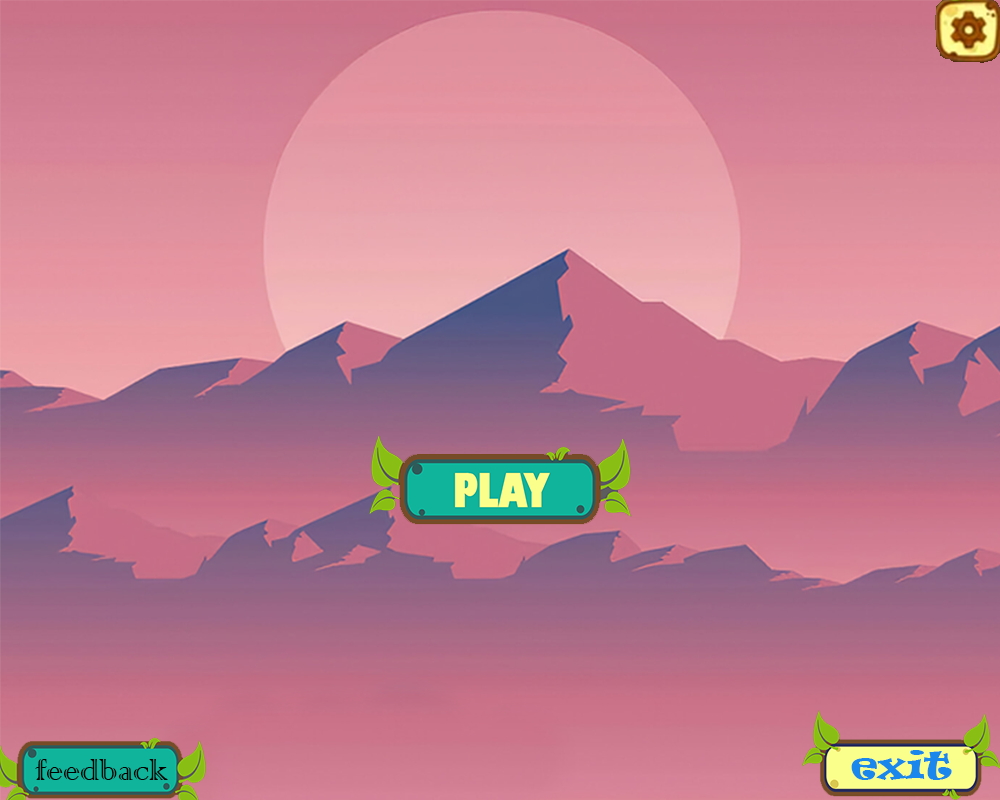
<style>
.page{position:relative;width:1000px;height:800px}
.page>*{position:absolute;margin:0}
.t1{font:36px "Ravie";color:#1a87ec}
.t2{font:36px "ColonnaMT";color:#000000}
</style>
<div class="page">
<p class="t1" style="left:851px;top:750px;width:101px;height:30px">exit</p>
<p class="t2" style="left:35px;top:759px;width:133px;height:21px">feedback</p>
</div>
